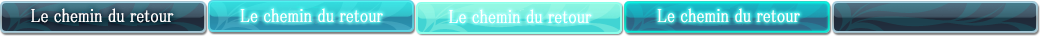
<style>
.page{position:relative;width:1040px;height:37px}
.page>*{position:absolute;margin:0}
.t1{font:19px "MS-PMincho";color:#ffffff;font-weight:bold;scale:0.84 1}
</style>
<div class="page">
<p class="t1" style="left:31px;top:8px;width:143px;height:15px">Le chemin du retour</p>
<p class="t1" style="left:240px;top:8px;width:143px;height:15px">Le chemin du retour</p>
<p class="t1" style="left:449px;top:9px;width:143px;height:15px">Le chemin du retour</p>
<p class="t1" style="left:657px;top:8px;width:143px;height:15px">Le chemin du retour</p>
</div>
